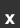
<style>
.page{position:relative;width:20px;height:28px;background:#333333}
.page>*{position:absolute;margin:0}
.t1{font:20px "ProductSans-Bold";color:#ffffff}
</style>
<div class="page">
<p class="t1" style="left:5px;top:14px;width:10px;height:10px">x</p>
</div>
